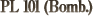
<style>
.page{position:relative;width:100px;height:19px;background:#ffffff}
.page>*{position:absolute;margin:0}
.t1{font:16px "RyuminPro-ExBold";letter-spacing:-0.08em;color:#4a3f32;font-weight:bold;scale:0.9 1}
</style>
<div class="page">
<p class="t1" style="left:0px;top:0px;width:93px;height:16px">PL 101 (Bomb.)</p>
</div>
